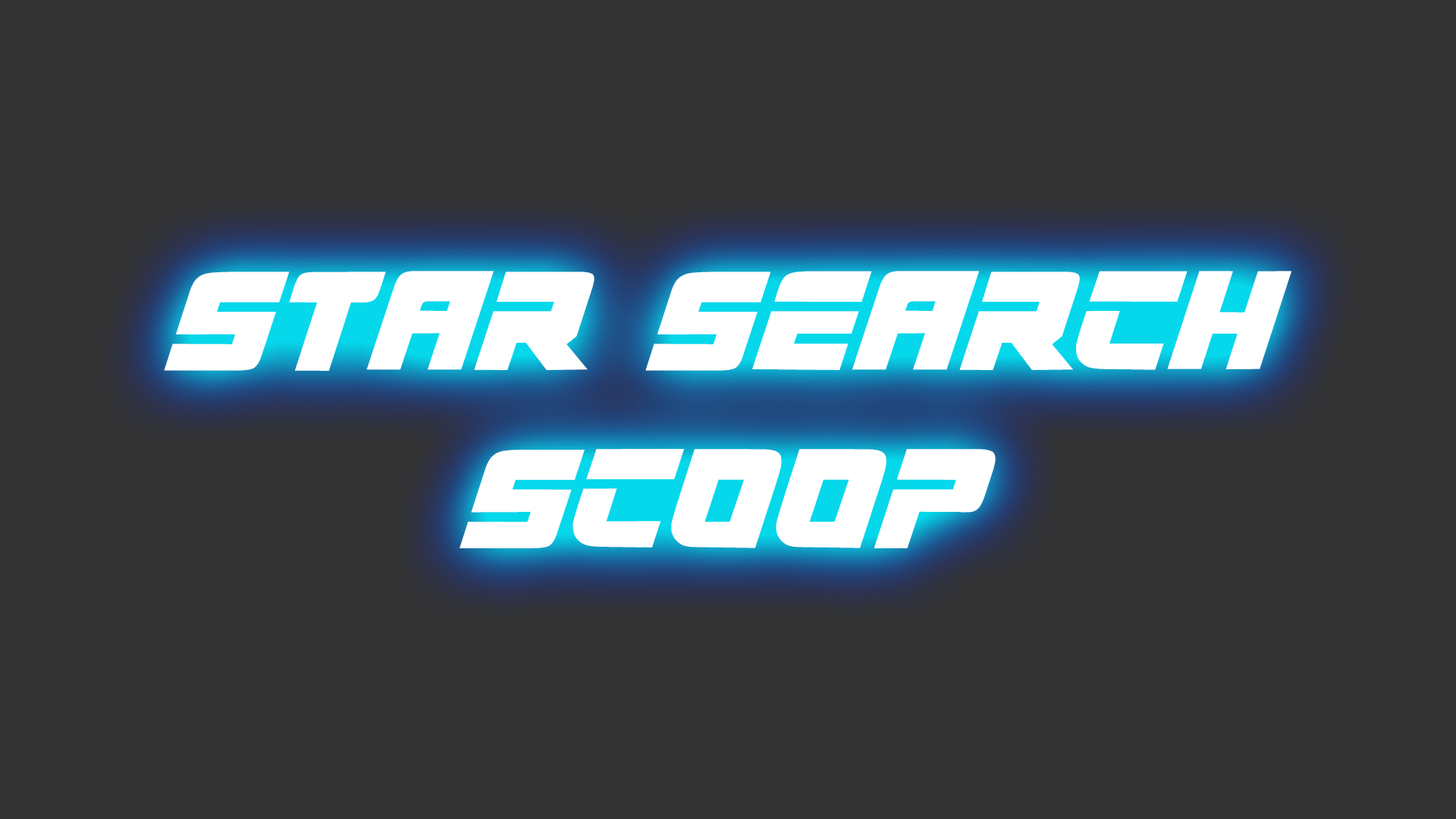
<style>
.page{position:relative;width:1456px;height:819px;background:#333333}
.page>*{position:absolute;margin:0}
.t1{font:148.1px "STAR7";letter-spacing:-0.001em;color:#ffffff}
</style>
<div class="page">
<p class="t1" style="left:164px;top:271px;width:1127px;height:277px;text-align:center">star search<br>scoop</p>
</div>
